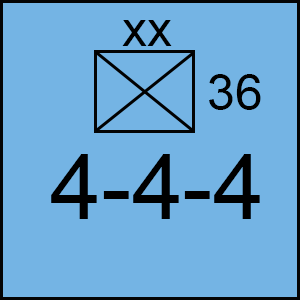
<style>
.page{position:relative;width:300px;height:300px;background:#74b4e4}
.page>*{position:absolute;margin:0}
.t1{font:50px "ArialMT";color:#000000}
.t2{font:91.7px "ArialMT";color:#000000}
</style>
<div class="page">
<p class="t1" style="left:122px;top:20px;width:50px;height:26px">xx</p>
<p class="t1" style="left:209px;top:74px;width:52px;height:36px">36</p>
<p class="t2" style="left:51px;top:154px;width:209px;height:65px">4-4-4</p>
</div>
